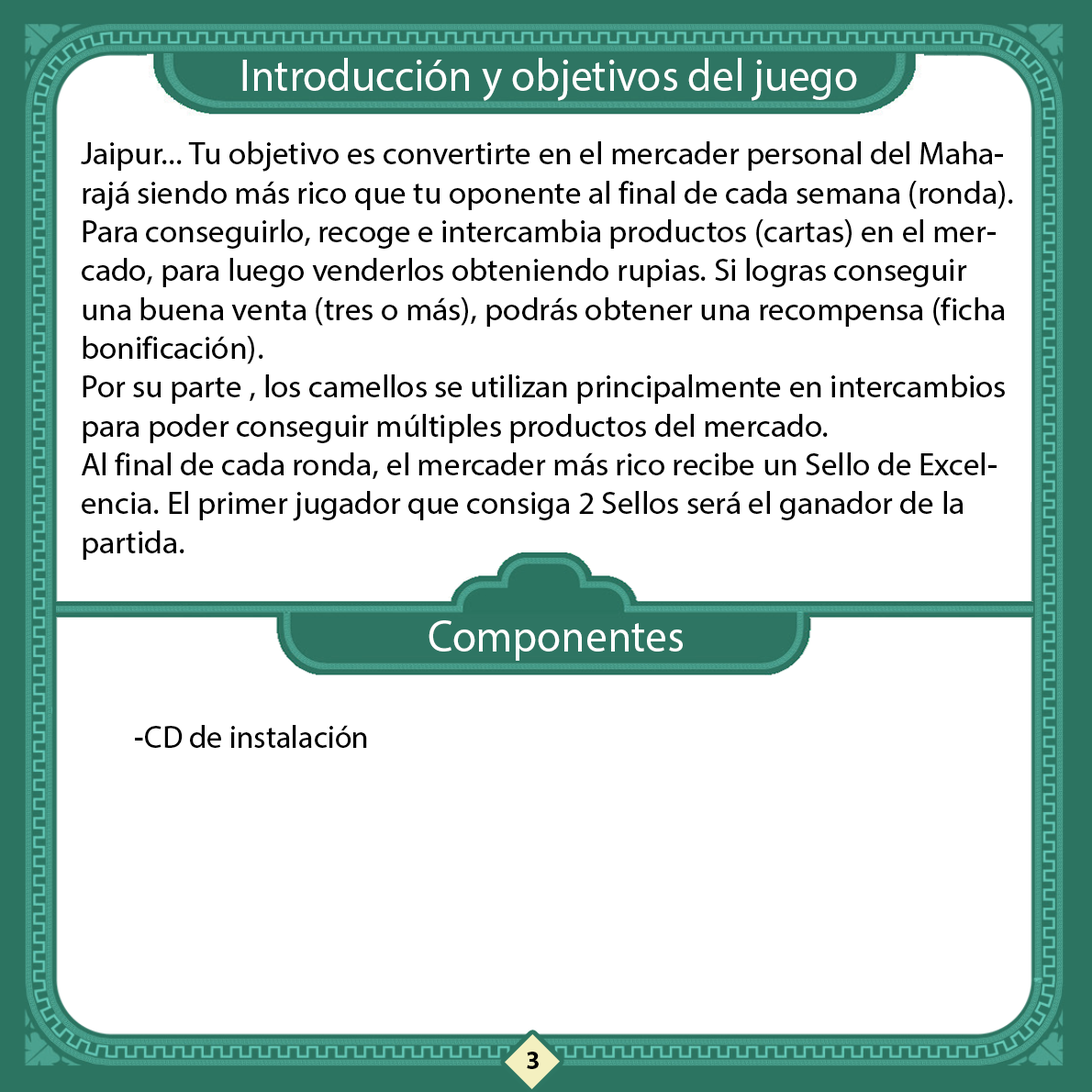
<style>
.page{position:relative;width:1092px;height:1092px;background:#ffffff}
.page>*{position:absolute;margin:0}
.t1{font:45.3px "MyriadHebrew-Regular";color:#ffffff;scale:0.96 1}
.t2{font:32.4px "MyriadHebrew-Regular";color:#000000}
.t3{font:32.4px "MyriadHebrew-Regular";color:#000000;scale:0.96 1}
.t4{font:25.9px "MyriadHebrew-Bold";color:#000000}
</style>
<div class="page">
<p class="t1" style="left:242px;top:58px;width:615px;height:43px">Introducción y objetivos del juego</p>
<p class="t2" style="left:81px;top:141px;width:932px;height:419px;text-align:right">Jaipur... Tu objetivo es convertirte en el mercader personal del Maharajá siendo más rico que tu oponente al final de cada semana (ronda). Para conseguirlo, recoge e intercambia productos (cartas) en el mercado, para luego venderlos obteniendo rupias. Si logras conseguir una buena venta (tres o más), podrás obtener una recompensa (ficha bonificación).<br>Por su parte , los camellos se utilizan principalmente en intercambios para poder conseguir múltiples productos del mercado. <br>Al final de cada ronda, el mercader más rico recibe un Sello de Excelencia. El primer jugador que consiga 2 Sellos será el ganador de la partida.</p>
<p class="t1" style="left:429px;top:620px;width:254px;height:41px">Componentes</p>
<p class="t3" style="left:135px;top:725px;width:232px;height:23px">CD de instalación-</p>
<p class="t4" style="left:527px;top:1052px;width:12px;height:17px">3</p>
</div>
